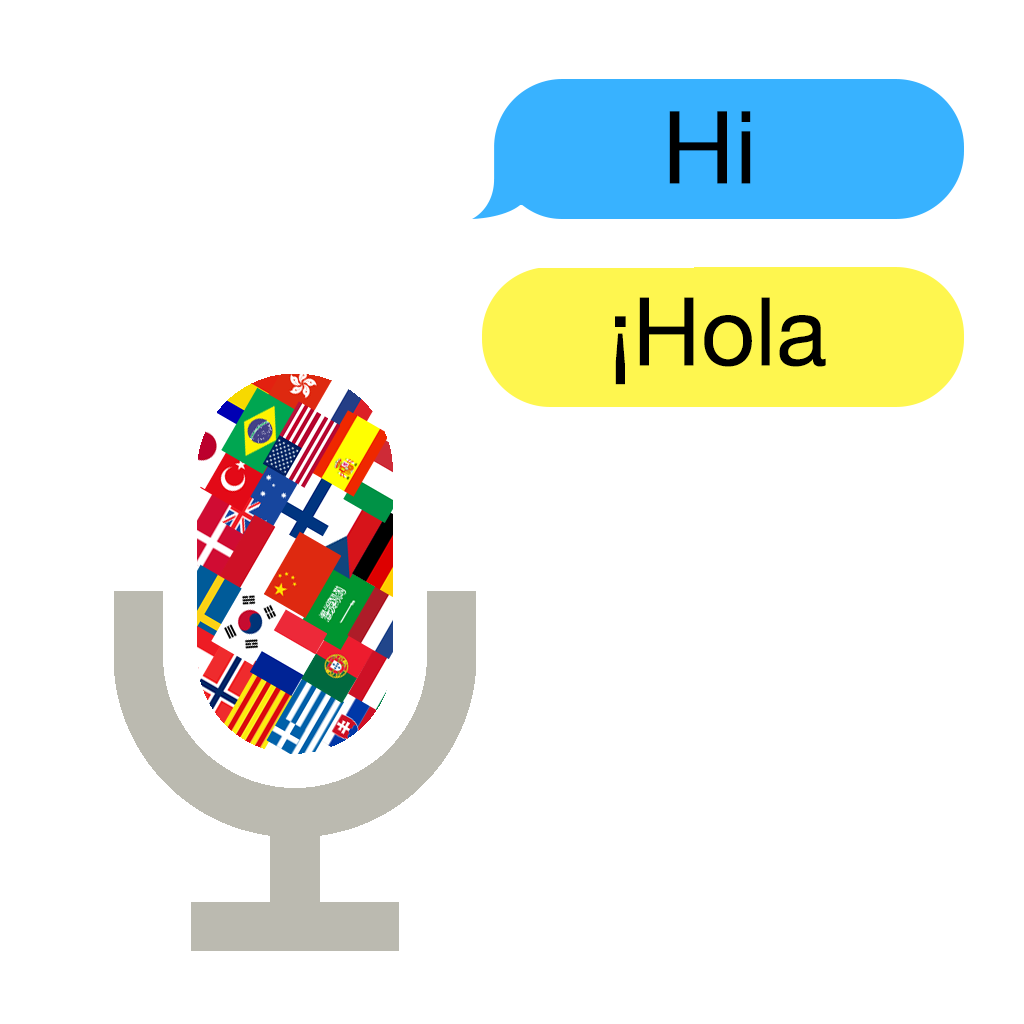
<style>
.page{position:relative;width:1024px;height:1024px;background:#ffffff}
.page>*{position:absolute;margin:0}
.t1{font:100.9px "HelveticaNeue";color:#000000}
.t2{font:94.9px "HelveticaNeue";color:#000000}
</style>
<div class="page">
<p class="t1" style="left:669px;top:111px;width:82px;height:73px">Hi</p>
<p class="t2" style="left:615px;top:297px;width:211px;height:88px">¡Hola</p>
</div>
